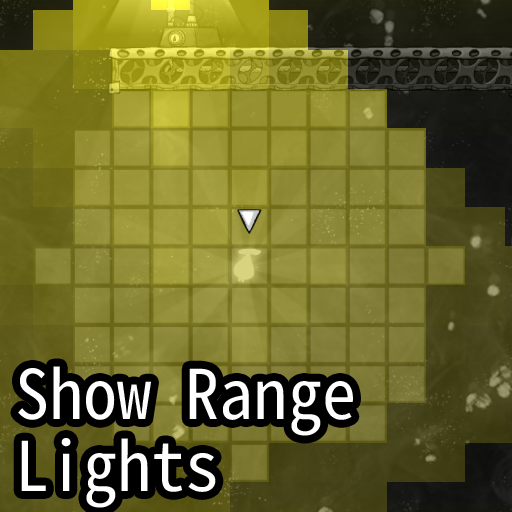
<style>
.page{position:relative;width:512px;height:512px}
.page>*{position:absolute;margin:0}
.t1{font:68.3px/71.7px "SourceHanSansHWSCVF-Regular";color:#ffffff;font-weight:bold}
</style>
<div class="page">
<p class="t1" style="left:18px;top:366px;width:335px;height:142px">Show Range<br>Lights</p>
</div>
